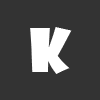
<style>
.page{position:relative;width:100px;height:100px;background:#333333}
.page>*{position:absolute;margin:0}
.t1{font:58.3px "ShowcardGothic-Reg";color:#ffffff}
</style>
<div class="page">
<p class="t1" style="left:30px;top:27px;width:42px;height:47px">k</p>
</div>
